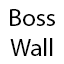
<style>
.page{position:relative;width:64px;height:64px;background:#ffffff}
.page>*{position:absolute;margin:0}
.t1{font:25px "MyriadPro-Regular";color:#010101}
</style>
<div class="page">
<p class="t1" style="left:10px;top:9px;width:45px;height:47px;text-align:center">Boss<br>Wall</p>
</div>
